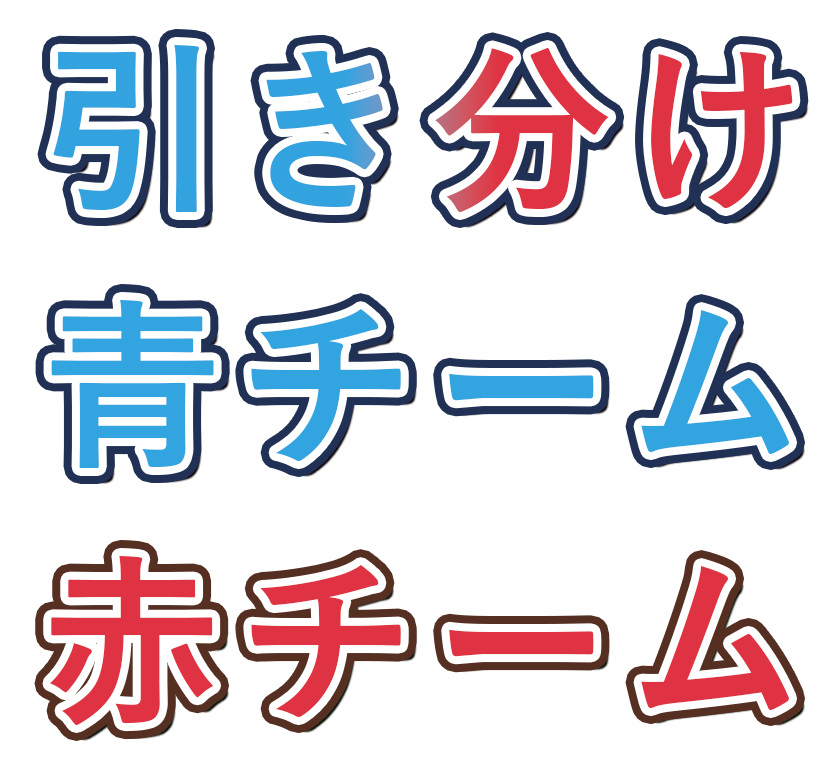
<style>
.page{position:relative;width:840px;height:768px;background:#ffffff}
.page>*{position:absolute;margin:0}
.t1{font:183.3px "YuGothic-Bold";letter-spacing:0.06em}
.t2{font:183.3px "YuGothic-Bold";letter-spacing:0.06em;color:#32a4df}
.t3{font:183.3px "YuGothic-Bold";letter-spacing:0.06em;color:#df3242}
</style>
<div class="page">
<p class="t1" style="left:53px;top:45px;width:740px;height:167px">引き分け</p>
<p class="t2" style="left:51px;top:300px;width:738px;height:168px">青チーム</p>
<p class="t3" style="left:50px;top:556px;width:739px;height:169px">赤チーム</p>
</div>
